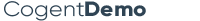
<style>
.page{position:relative;width:200px;height:21px;background:#ffffff}
.page>*{position:absolute;margin:0}
.t1{font:20.8px "Gilroy-Light";color:#2f4454;scale:1.1 1}
.t2{font:20.8px "Gilroy-ExtraBold";color:#2f4454;scale:1.1 1}
</style>
<div class="page">
<p class="t1" style="left:4px;top:1px;width:142px;height:20px">Cogent<span class="t2">Demo</span></p>
</div>
